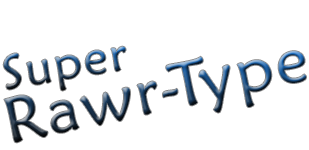
<style>
.page{position:relative;width:309px;height:150px;background:#ffffff}
.page>*{position:absolute;margin:0}
.t1{font:48px "MaiandraGD-Regular";letter-spacing:0.05em}
.t2{font:64px "MaiandraGD-Regular";letter-spacing:0.05em}
</style>
<div class="page">
<p class="t1" style="left:3px;top:46px;width:123px;height:45px;rotate:-9deg">Super</p>
<p class="t2" style="left:4px;top:51px;width:302px;height:92px;rotate:-12deg">Rawr-Type</p>
</div>
